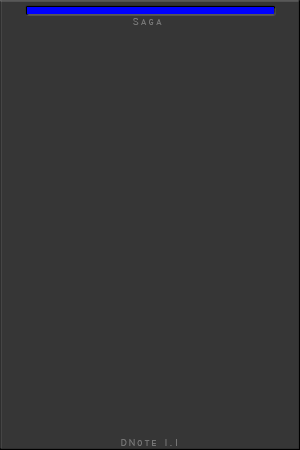
<style>
.page{position:relative;width:300px;height:450px;background:#363636}
.page>*{position:absolute;margin:0}
.t1{font:10px "Technic";letter-spacing:0.2em;color:#767676}
</style>
<div class="page">
<p class="t1" style="left:133px;top:18px;width:29px;height:7px">Saga</p>
<p class="t1" style="left:121px;top:439px;width:56px;height:7px">DNote 1.1</p>
</div>
